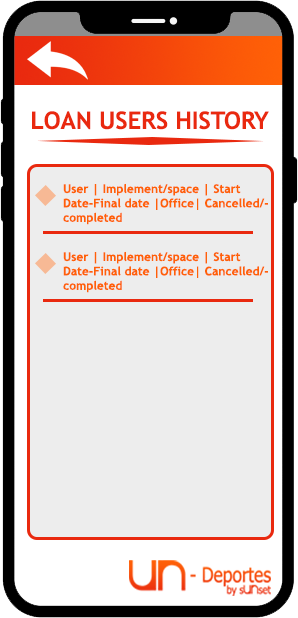
<style>
.page{position:relative;width:298px;height:618px;background:#ededed}
.page>*{position:absolute;margin:0}
.t1{font:24px "TrebuchetMS-Bold";color:#e9290f}
.t2{font:12px "TrebuchetMS-Bold";color:#ff6107}
</style>
<div class="page">
<p class="t1" style="left:32px;top:111px;width:237px;height:19px">LOAN USERS HISTORY</p>
<p class="t2" style="left:63px;top:183px;width:205px;height:42px">User | Implement/space | Start Date-Final date |Office| Cancelled/completed</p>
<p class="t2" style="left:63px;top:251px;width:205px;height:42px">User | Implement/space | Start Date-Final date |Office| Cancelled/completed</p>
</div>
